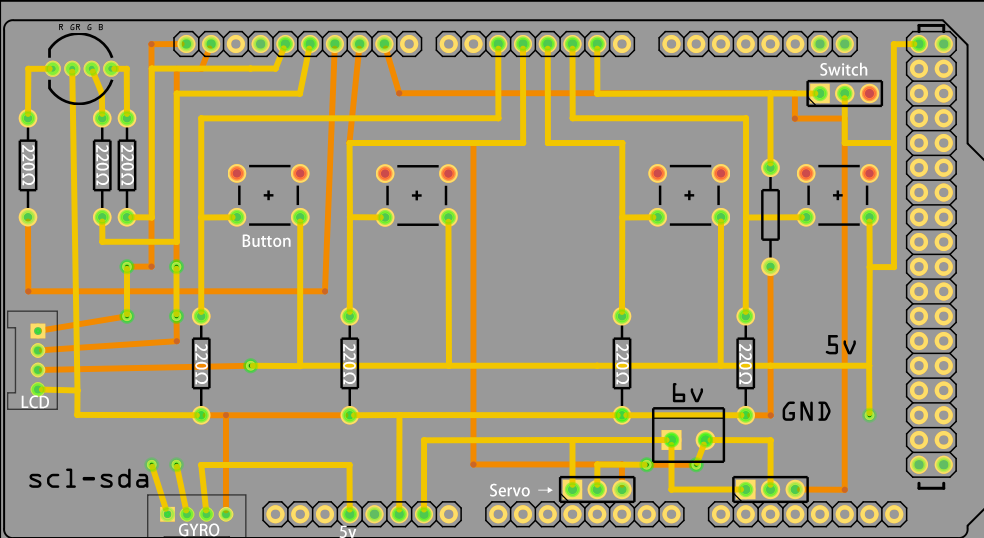
<style>
.page{position:relative;width:984px;height:538px;background:#999999}
.page>*{position:absolute;margin:0}
.t1{font:12px "AdobeHeitiStd-Regular";color:#ffffff}
.t2{font:16px "AdobeHeitiStd-Regular";color:#ffffff}
</style>
<div class="page">
<p class="t1" style="left:820px;top:62px;width:48px;height:14px">Switch</p>
<p class="t2" style="left:22px;top:145px;width:13px;height:41px;rotate:90deg">220Ω</p>
<p class="t2" style="left:96px;top:145px;width:13px;height:41px;rotate:90deg">220Ω</p>
<p class="t2" style="left:121px;top:145px;width:13px;height:41px;rotate:90deg">220Ω</p>
<p class="t1" style="left:242px;top:234px;width:49px;height:13px">Button</p>
<p class="t2" style="left:195px;top:344px;width:13px;height:41px;rotate:90deg">220Ω</p>
<p class="t2" style="left:343px;top:344px;width:13px;height:41px;rotate:90deg">220Ω</p>
<p class="t2" style="left:616px;top:344px;width:13px;height:41px;rotate:90deg">220Ω</p>
<p class="t2" style="left:739px;top:344px;width:13px;height:41px;rotate:90deg">220Ω</p>
<p class="t2" style="left:21px;top:395px;width:28px;height:14px">LCD</p>
<p class="t1" style="left:490px;top:483px;width:63px;height:14px">Servo  →</p>
<p class="t1" style="left:179px;top:523px;width:41px;height:14px">GYRO</p>
<p class="t1" style="left:339px;top:525px;width:18px;height:13px">5v</p>
</div>
